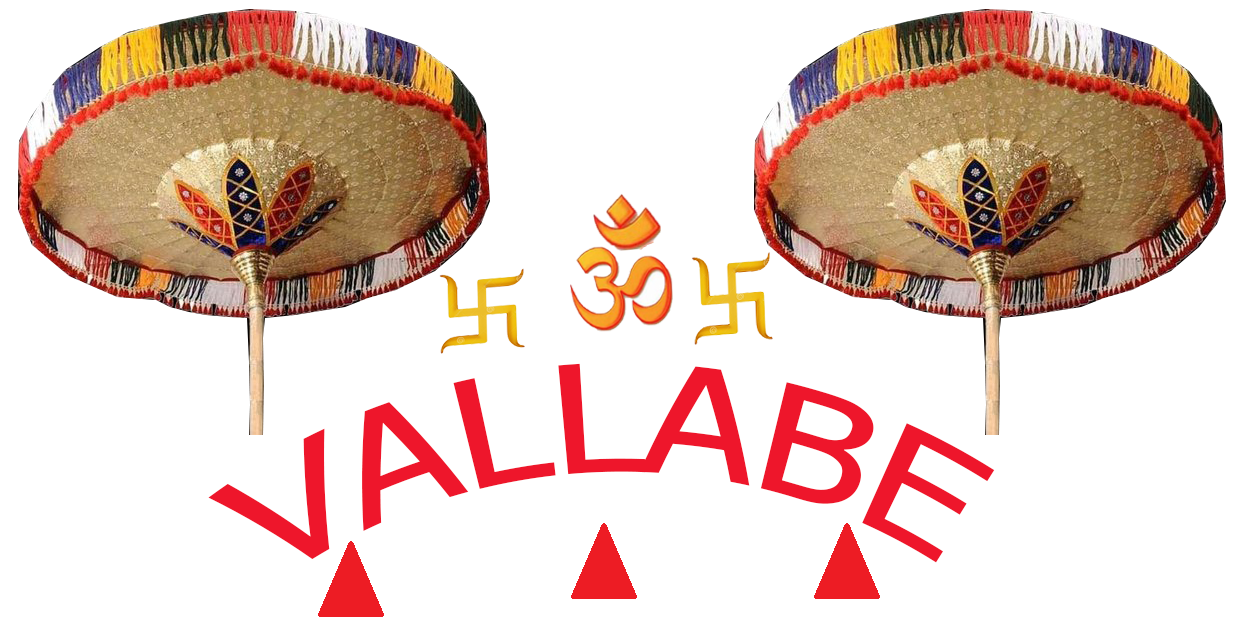
<style>
.page{position:relative;width:1236px;height:618px;background:#ffffff}
.page>*{position:absolute;margin:0}
.t1{font:150px "Tahoma";color:#ee162b}
</style>
<div class="page">
<p class="t1" style="left:208px;top:363px;width:787px;height:200px">VALLABE</p>
</div>
